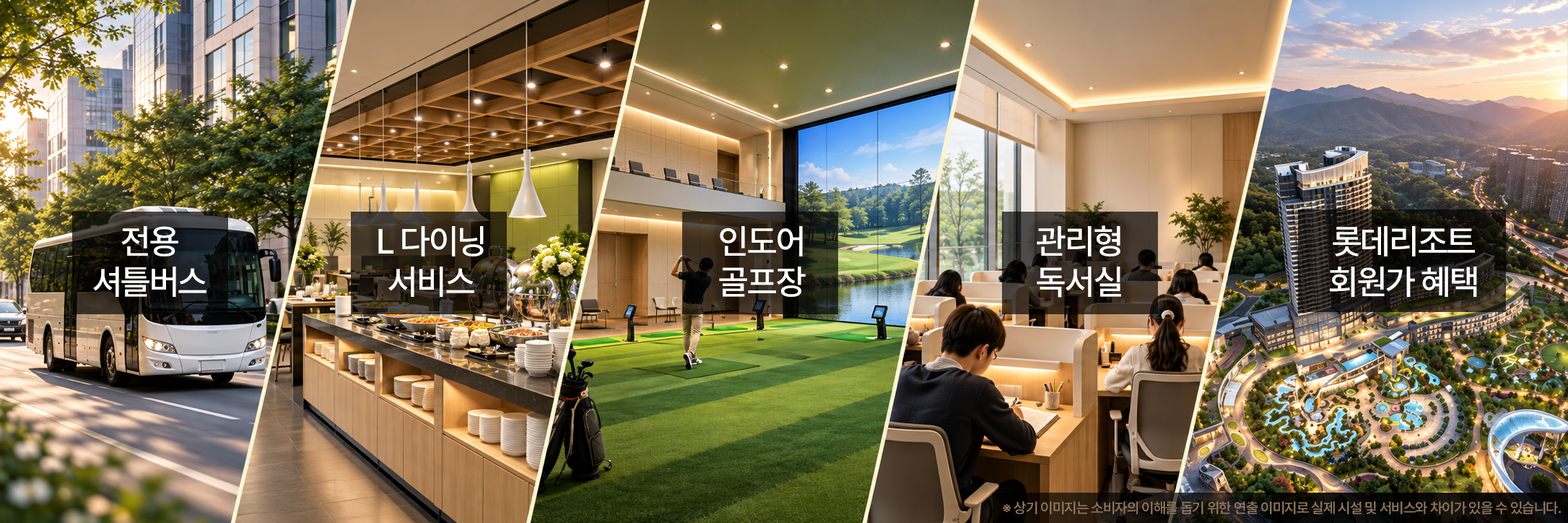
<style>
.page{position:relative;width:1568px;height:523px}
.page>*{position:absolute;margin:0}
.t1{font:34.7px/40.4px "Pretendard-Medium";letter-spacing:-0.04em;color:#ffffff}
.t2{font:14.4px "Pretendard-Medium";letter-spacing:-0.04em;color:#95785e}
</style>
<div class="page">
<p class="t1" style="left:93px;top:226px;width:113px;height:71px;text-align:center">전용<br>셔틀버스</p>
<p class="t1" style="left:378px;top:226px;width:106px;height:71px;text-align:center">L 다이닝<br>서비스</p>
<p class="t1" style="left:719px;top:226px;width:87px;height:71px;text-align:center">인도어<br>골프장</p>
<p class="t1" style="left:1037px;top:225px;width:84px;height:72px;text-align:center">관리형<br>독서실</p>
<p class="t1" style="left:1329px;top:226px;width:148px;height:71px;text-align:center">롯데리조트<br>회원가 혜택</p>
<p class="t2" style="left:1003px;top:501px;width:558px;height:13px">※ 상기 이미지는 소비자의 이해를 돕기 위한 연출 이미지로 실제 시설 및 서비스와 차이가 있을 수 있습니다.</p>
</div>
